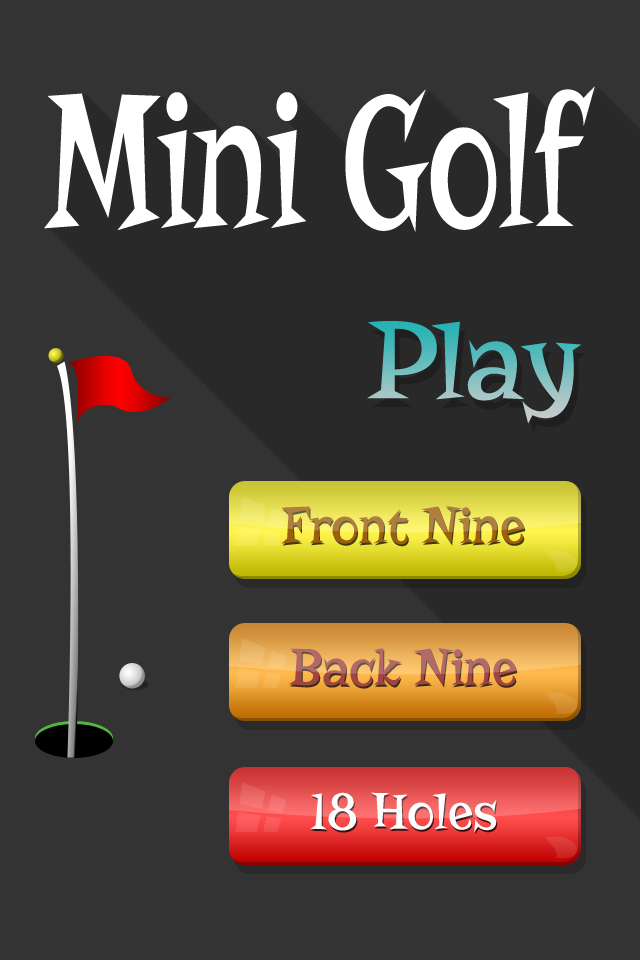
<style>
.page{position:relative;width:640px;height:960px;background:#333333}
.page>*{position:absolute;margin:0}
.t1{font:199px "Risque-Regular";color:#ffffff;scale:0.71 1}
.t2{font:114.2px "Risque-Regular"}
.t3{font:52.9px "Risque-Regular"}
.t4{font:52.9px "Risque-Regular";color:#ffffff}
</style>
<div class="page">
<p class="t1" style="left:44px;top:86px;width:551px;height:146px">Mini Golf</p>
<p class="t2" style="left:367px;top:321px;width:215px;height:103px">Play</p>
<p class="t3" style="left:281px;top:505px;width:244px;height:40px">Front Nine</p>
<p class="t3" style="left:288px;top:647px;width:229px;height:40px">Back Nine</p>
<p class="t4" style="left:310px;top:792px;width:187px;height:40px">18 Holes</p>
</div>
